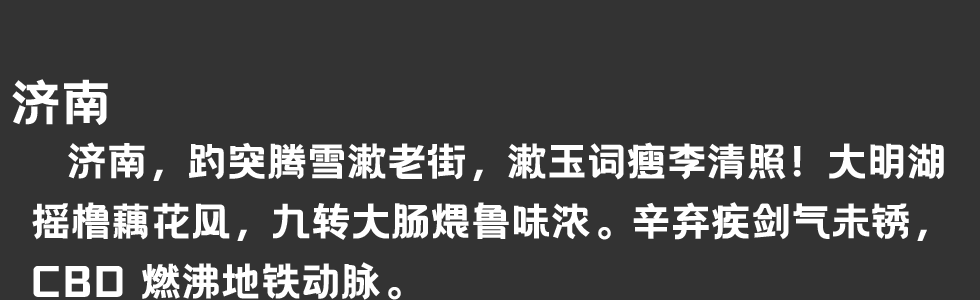
<style>
.page{position:relative;width:980px;height:300px;background:#333333}
.page>*{position:absolute;margin:0}
.t1{font:50px "HelloFont-WenYiHei";color:#ffffff}
.t2{font:40px/60px "HelloFont-WenYiHei";color:#ffffff}
</style>
<div class="page">
<p class="t1" style="left:12px;top:79px;width:96px;height:46px">济南</p>
<p class="t2" style="left:32px;top:142px;width:912px;height:158px">济南，趵突腾雪漱老街，漱玉词瘦李清照！大明湖<br>摇橹藕花风，九转大肠煨鲁味浓。辛弃疾剑气未锈，<br>CBD 燃沸地铁动脉。</p>
</div>
